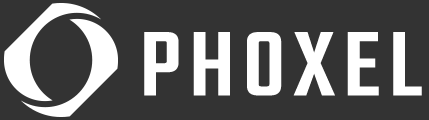
<style>
.page{position:relative;width:429px;height:120px;background:#333333}
.page>*{position:absolute;margin:0}
.t1{font:100px "Teko-Medium";letter-spacing:0.08em;color:#ffffff}
</style>
<div class="page">
<p class="t1" style="left:144px;top:32px;width:278px;height:64px">PHOXEL</p>
</div>
